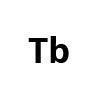
<style>
.page{position:relative;width:100px;height:100px;background:#ffffff}
.page>*{position:absolute;margin:0}
.t1{font:35px "OpenSans-Bold";color:#000000}
</style>
<div class="page">
<p class="t1" style="left:28px;top:36px;width:41px;height:27px">Tb</p>
</div>
